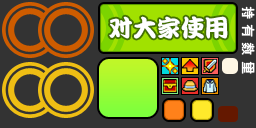
<style>
.page{position:relative;width:256px;height:128px;background:#333333}
.page>*{position:absolute;margin:0}
.t1{font:12px "FZXS12--GB1-0";letter-spacing:0.44em;color:#ffffff;font-weight:bold}
.t2{font:24px "DFPKanTingLiuW9";color:#ffffff}
</style>
<div class="page">
<p class="t1" style="left:241px;top:6px;width:14px;height:68px;rotate:90deg">持有数量</p>
<p class="t2" style="left:109px;top:16px;width:119px;height:23px">对大家使用</p>
</div>
